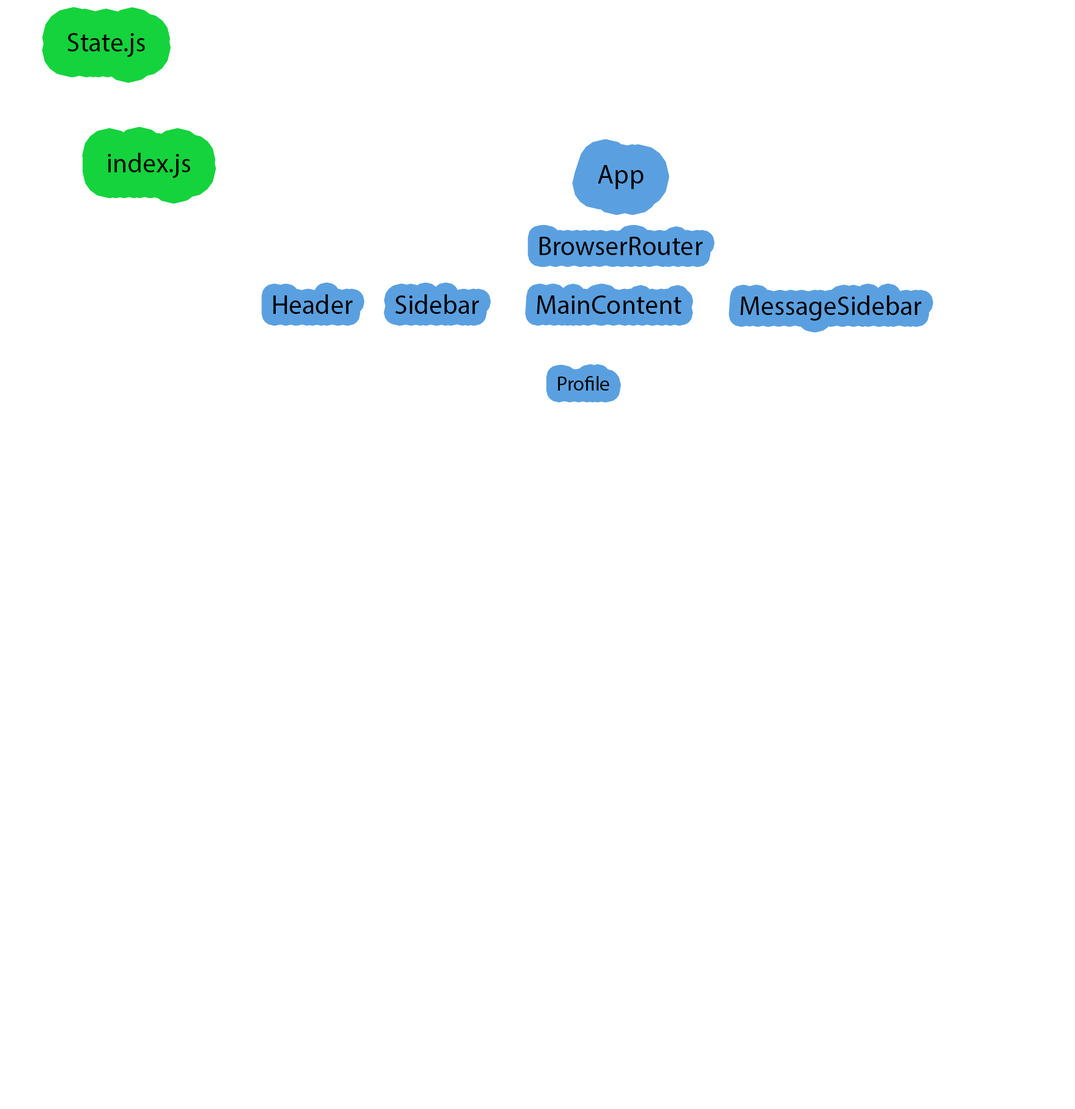
<style>
.page{position:relative;width:1075px;height:1109px;background:#ffffff}
.page>*{position:absolute;margin:0}
.t1{font:26.9px "MyriadPro-Regular";color:#000000}
.t2{font:20.1px "MyriadPro-Regular";color:#000000}
</style>
<div class="page">
<p class="t1" style="left:68px;top:33px;width:77px;height:24px">State.js</p>
<p class="t1" style="left:108px;top:153px;width:82px;height:25px">index.js</p>
<p class="t1" style="left:598px;top:165px;width:46px;height:24px">App</p>
<p class="t1" style="left:539px;top:237px;width:164px;height:18px">BrowserRouter</p>
<p class="t1" style="left:273px;top:294px;width:80px;height:20px">Header</p>
<p class="t1" style="left:396px;top:294px;width:83px;height:20px">Sidebar</p>
<p class="t1" style="left:537px;top:295px;width:144px;height:19px">MainContent</p>
<p class="t1" style="left:741px;top:295px;width:181px;height:26px">MessageSidebar</p>
<p class="t2" style="left:558px;top:376px;width:51px;height:15px">Profile</p>
</div>
